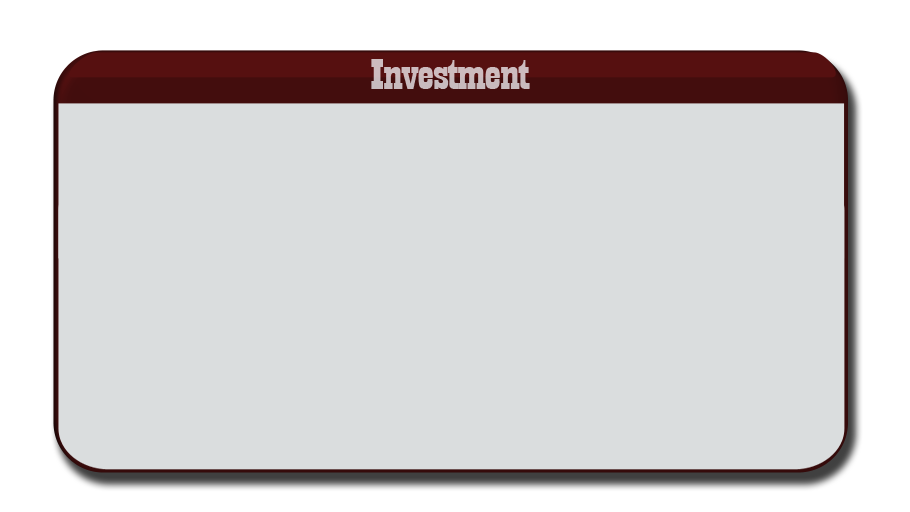
<style>
.page{position:relative;width:910px;height:512px;background:#daddde}
.page>*{position:absolute;margin:0}
.t1{font:44.6px "Playbill";letter-spacing:-0.025em;color:#cabbbe;scale:1.61 1}
</style>
<div class="page">
<p class="t1" style="left:371px;top:59px;width:159px;height:30px">Investment</p>
</div>
